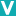
<style>
.page{position:relative;width:16px;height:16px;background:#10abb0}
.page>*{position:absolute;margin:0}
.t1{font:19.4px "Montserrat-Bold";color:#ffffff}
</style>
<div class="page">
<p class="t1" style="left:0px;top:1px;width:15px;height:14px">V</p>
</div>
